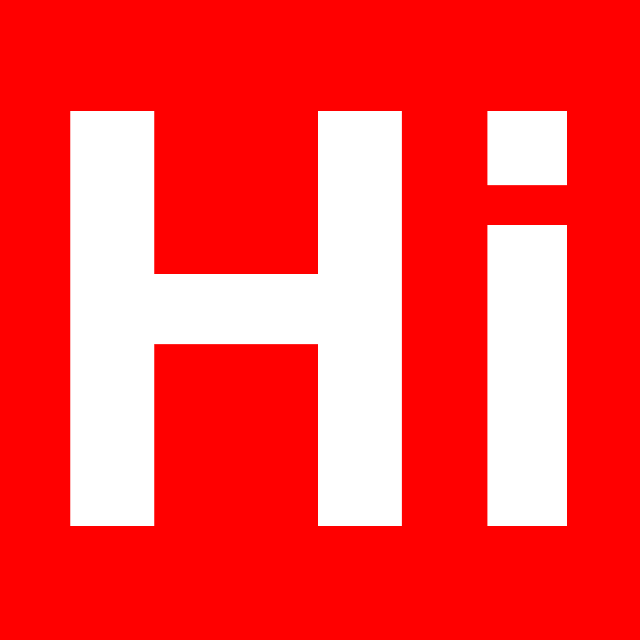
<style>
.page{position:relative;width:640px;height:640px;background:#ff0000}
.page>*{position:absolute;margin:0}
.t1{font:579.2px "Arial-BoldMT";color:#ffffff}
</style>
<div class="page">
<p class="t1" style="left:70px;top:111px;width:497px;height:415px">Hi</p>
</div>
